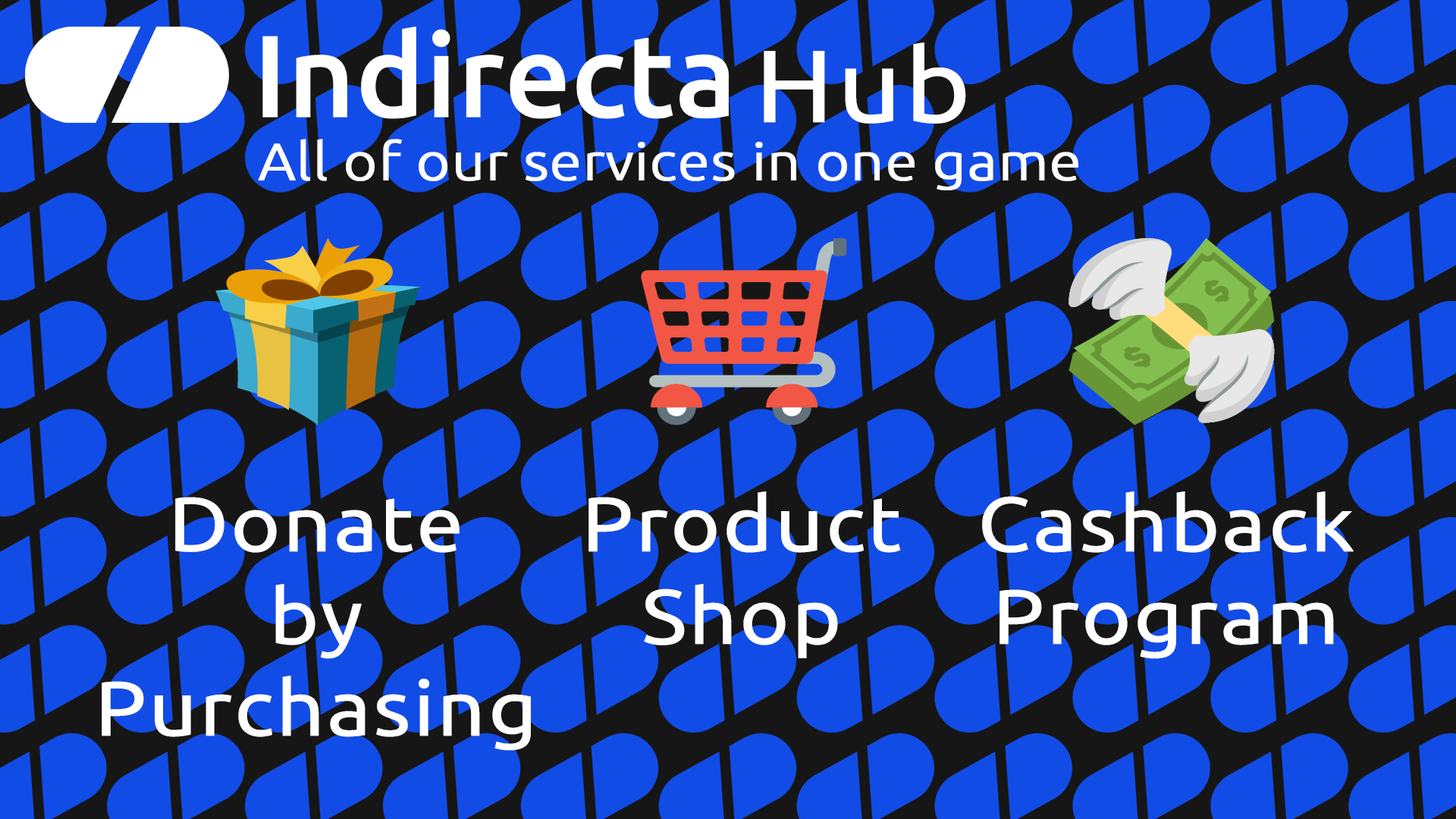
<style>
.page{position:relative;width:1456px;height:819px;background:#124ce6}
.page>*{position:absolute;margin:0}
.t1{font:102.4px "Ubuntu-Regular";color:#ffffff;font-weight:bold;scale:1.1 1}
.t2{font:52.3px "Ubuntu-Light";color:#ffffff;font-weight:bold;scale:1.1 1}
.t3{font:77px "Ubuntu-Regular";color:#ffffff;font-weight:bold;scale:1.1 1}
</style>
<div class="page">
<p class="t1" style="left:764px;top:42px;width:202px;height:82px">Hub</p>
<p class="t2" style="left:258px;top:139px;width:820px;height:51px">All of our services in one game</p>
<p class="t3" style="left:102px;top:497px;width:429px;height:254px;text-align:center">Donate<br>by<br>Purchasing</p>
<p class="t3" style="left:588px;top:491px;width:313px;height:167px;text-align:center">Product<br>Shop</p>
<p class="t3" style="left:982px;top:491px;width:372px;height:168px;text-align:center">Cashback<br>Program</p>
</div>
